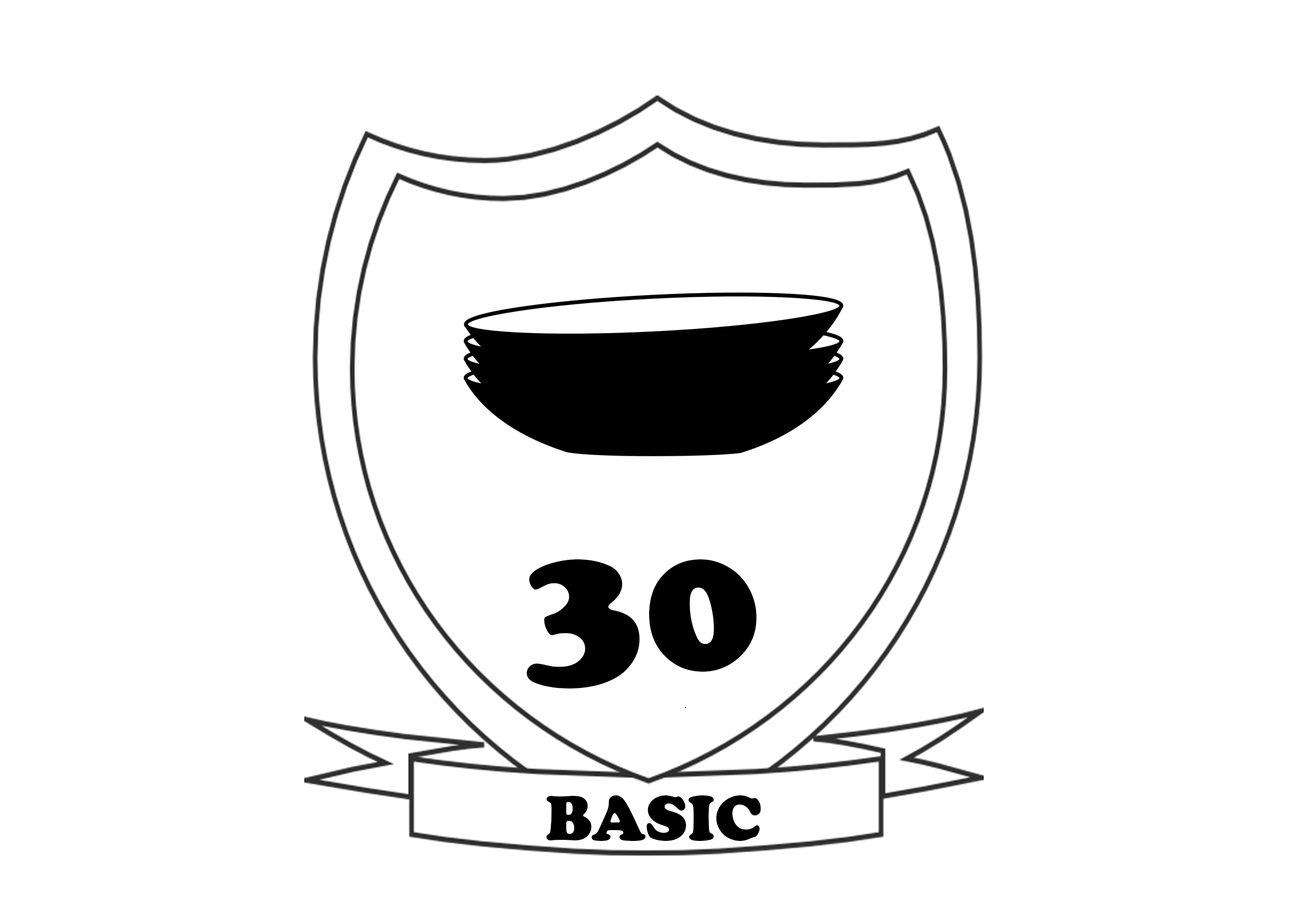
<style>
.page{position:relative;width:1307px;height:912px;background:#ffffff}
.page>*{position:absolute;margin:0}
.t1{font:195.3px "CooperBlack";color:#000000}
.t2{font:65.1px "CooperBlack";color:#000000}
</style>
<div class="page">
<p class="t1" style="left:527px;top:559px;width:230px;height:129px">30</p>
<p class="t2" style="left:546px;top:795px;width:215px;height:46px">BASIC</p>
</div>
